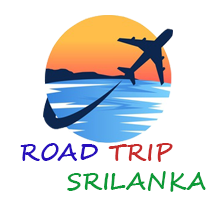
<style>
.page{position:relative;width:216px;height:211px;background:#ffffff}
.page>*{position:absolute;margin:0}
.t1{font:24px "SegoeScript-Bold";color:#0c9a37}
.t2{font:24px "SegoeScript-Bold";color:#270fbd}
.t3{font:24px "SegoeScript-Bold";color:#c62b2b}
</style>
<div class="page">
<p class="t1" style="left:20px;top:143px;width:186px;height:49px"><span class="t2">ROAD </span><span class="t3">TRIP<br>     </span>SRILANKA</p>
</div>
